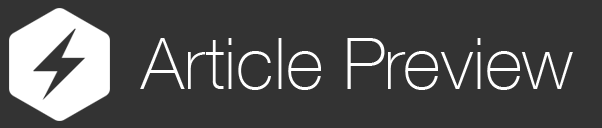
<style>
.page{position:relative;width:602px;height:128px;background:#333333}
.page>*{position:absolute;margin:0}
.t1{font:72px "HelveticaNeue-Thin";color:#ffffff}
</style>
<div class="page">
<p class="t1" style="left:140px;top:38px;width:433px;height:52px">Article Preview</p>
</div>
